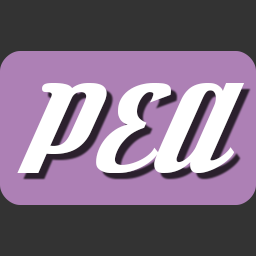
<style>
.page{position:relative;width:256px;height:256px;background:#333333}
.page>*{position:absolute;margin:0}
.t1{font:120px "DeftoneStylus-Regular";letter-spacing:0.05em;color:#ffffff}
</style>
<div class="page">
<p class="t1" style="left:17px;top:83px;width:228px;height:90px">PEA</p>
</div>
